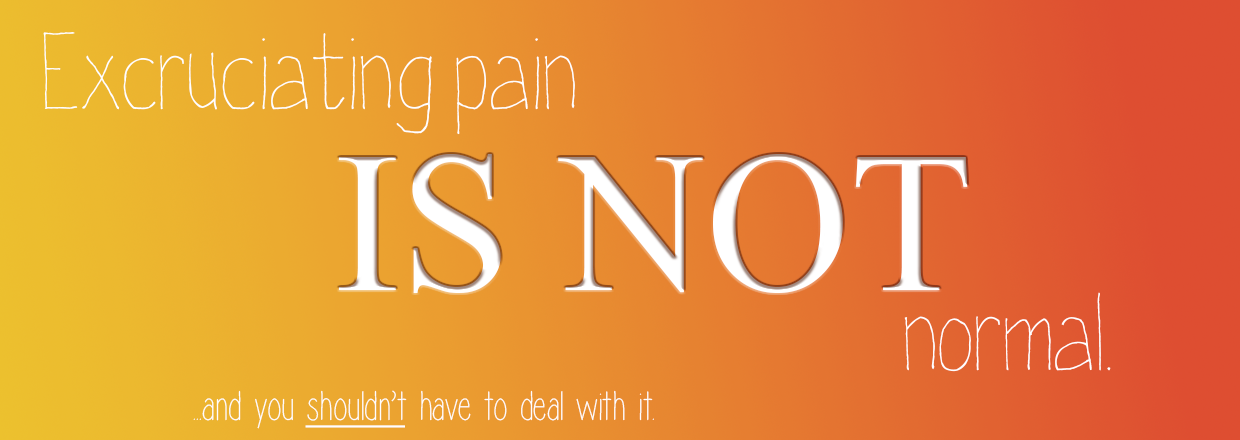
<style>
.page{position:relative;width:1240px;height:440px}
.page>*{position:absolute;margin:0}
.t1{font:108.3px "lateron";color:#ffffff}
.t2{font:200px "TimesNewRomanPSMT";color:#ffffff}
.t3{font:41.7px "Isabelle-Layne";color:#ffffff}
.t4{font:41.7px "Isabelle-Layne";color:#ffffff;text-decoration:underline}
</style>
<div class="page">
<p class="t1" style="left:43px;top:32px;width:532px;height:103px">Excruciating pain</p>
<p class="t2" style="left:338px;top:154px;width:630px;height:139px">IS NOT</p>
<p class="t1" style="left:904px;top:292px;width:207px;height:80px">normal.</p>
<p class="t3" style="left:193px;top:390px;width:461px;height:39px">...and you <span class="t4">shouldn’t</span> have to deal with it.</p>
</div>
